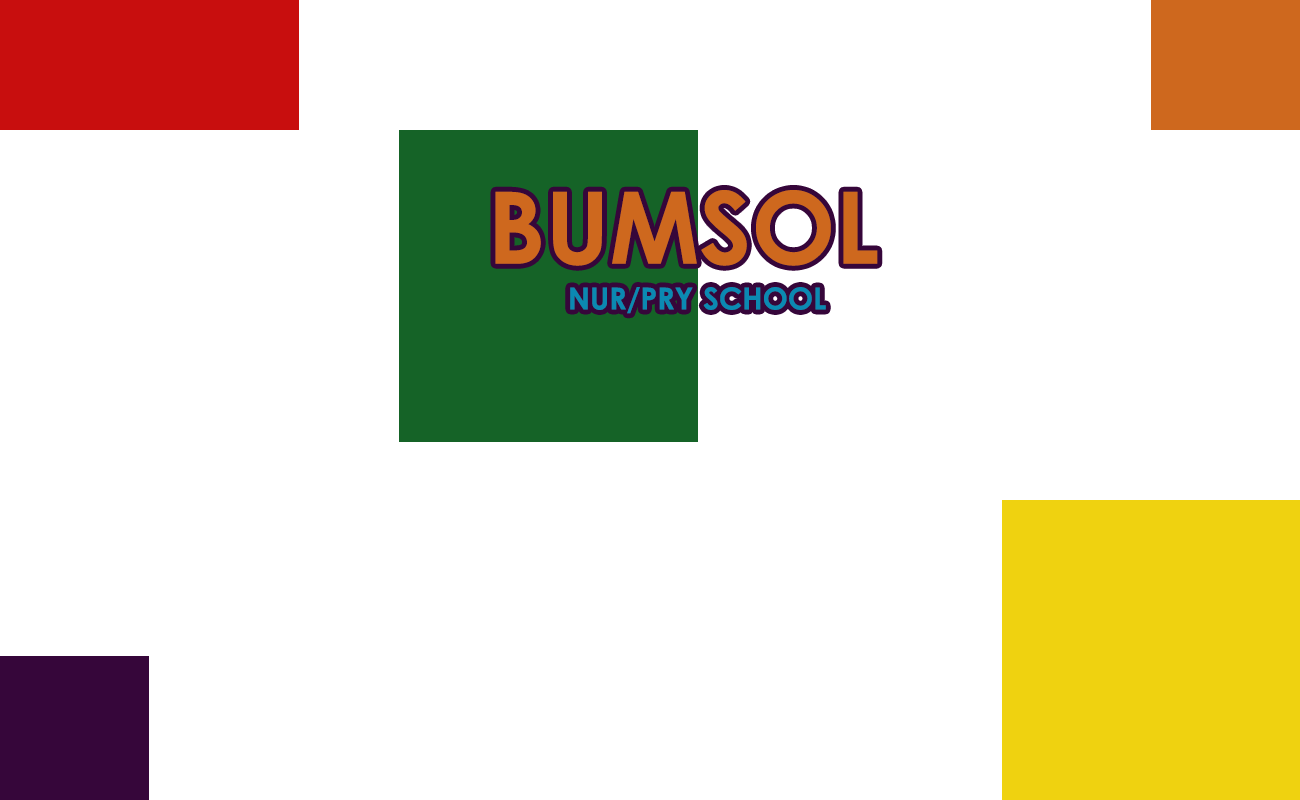
<style>
.page{position:relative;width:1300px;height:800px;background:#ffffff}
.page>*{position:absolute;margin:0}
.t1{font:100px "CenturyGothic-Bold";color:#ce681e}
.t2{font:30px "CenturyGothic-Bold";color:#0b89b2}
</style>
<div class="page">
<p class="t1" style="left:495px;top:190px;width:383px;height:76px">BUMSOL</p>
<p class="t2" style="left:570px;top:287px;width:123px;height:27px">NUR/PRY</p>
<p class="t2" style="left:703px;top:287px;width:123px;height:23px">SCHOOL</p>
</div>
